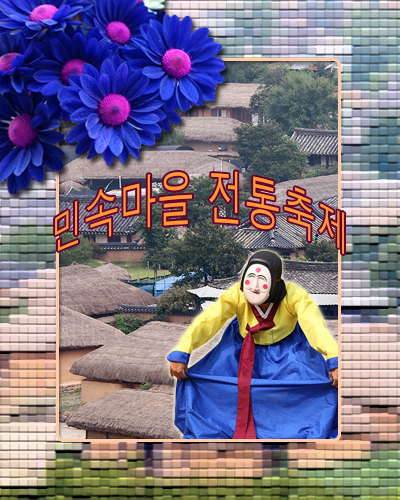
<style>
.page{position:relative;width:400px;height:500px}
.page>*{position:absolute;margin:0}
.t1{font:35px "Dotum";color:#ff9933}
</style>
<div class="page">
<p class="t1" style="left:55px;top:171px;width:290px;height:84px;text-align:center">민속마을 전통축제</p>
</div>
